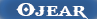
<style>
.page{position:relative;width:97px;height:19px;background:#2f5a90}
.page>*{position:absolute;margin:0}
.t1{font:20.5px "GodOfWar";color:#ffffff;scale:1.06 1}
</style>
<div class="page">
<p class="t1" style="left:16px;top:3px;width:72px;height:16px">Ojear</p>
</div>
